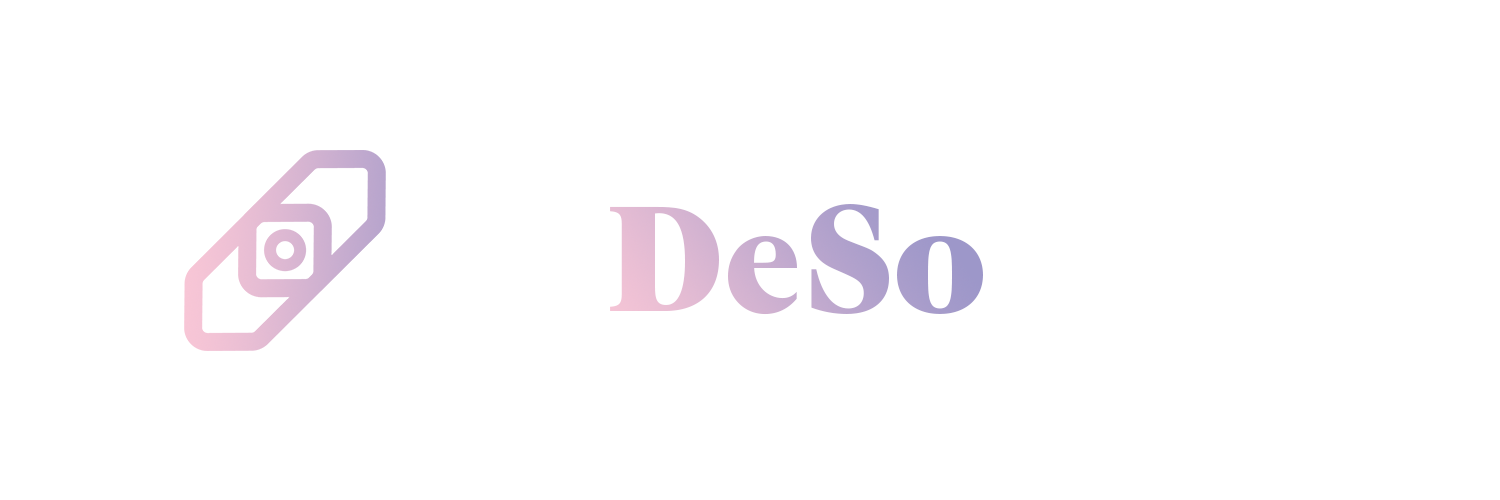
<style>
.page{position:relative;width:1500px;height:500px;background:#ffffff}
.page>*{position:absolute;margin:0}
.t1{font:150px "GrouchITCbyBT-Regular"}
</style>
<div class="page">
<p class="t1" style="left:610px;top:204px;width:373px;height:111px">DeSo</p>
</div>
